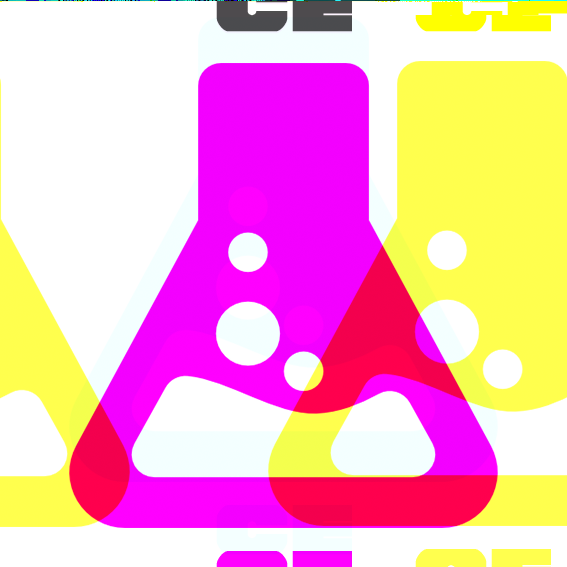
<style>
.page{position:relative;width:567px;height:567px;background:#ffffff}
.page>*{position:absolute;margin:0}
.t1{font:90px "Bummer";font-weight:bold;scale:0.95 1}
</style>
<div class="page">
<p class="t1" style="left:216px;top:504px;width:136px;height:50px">CE</p>
</div>
